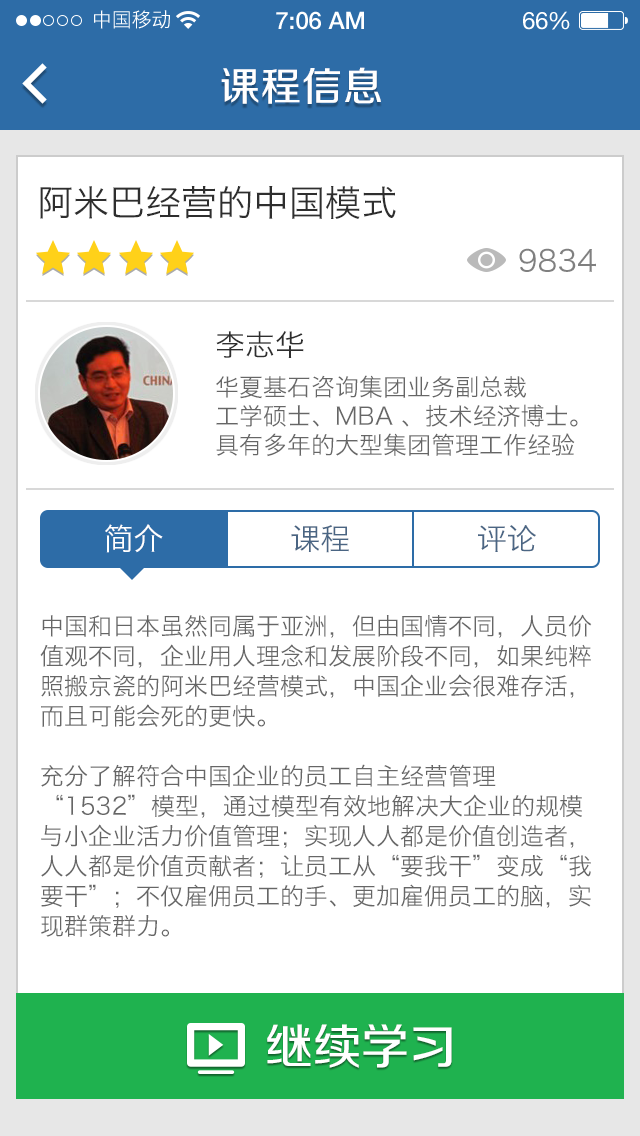
<style>
.page{position:relative;width:640px;height:1136px;background:#ffffff}
.page>*{position:absolute;margin:0}
.t1{font:20px "HiraginoSansGB-W3";color:#ffffff}
.t2{font:24px "HelveticaNeue-Medium";color:#ffffff}
.t3{font:24px "HelveticaNeue";color:#ffffff}
.t4{font:24px "HelveticaNeue";letter-spacing:-0.02em;color:#ffffff}
.t5{font:40px "FZZZHUNHJW--GB1-0";letter-spacing:0.025em;color:#ffffff}
.t6{font:36px "HiraginoSansGB-W3";color:#2e2e2e}
.t7{font:30px "HiraginoSansGB-W3";color:#808080}
.t8{font:30px "HiraginoSansGB-W3";color:#2e2e2e}
.t9{font:24px "HiraginoSansGB-W3";color:#666666}
.t10{font:30px "HiraginoSansGB-W3";color:#ffffff}
.t11{font:30px "HiraginoSansGB-W3";color:#4b6684}
.t12{font:24px/30px "HiraginoSansGB-W3";color:#666666}
.t13{font:48px "FZZZHUNHJW--GB1-0";color:#ffffff}
</style>
<div class="page">
<p class="t1" style="left:94px;top:10px;width:76px;height:19px">中国移动</p>
<p class="t2" style="left:276px;top:11px;width:88px;height:19px">7:06 AM</p>
<p class="t3" style="left:523px;top:11px;width:47px;height:19px">6<span class="t4">6</span>%</p>
<p class="t5" style="left:221px;top:67px;width:160px;height:37px">课程信息</p>
<p class="t6" style="left:40px;top:186px;width:356px;height:33px">阿米巴经营的中国模式</p>
<p class="t7" style="left:519px;top:248px;width:77px;height:24px">9834</p>
<p class="t8" style="left:216px;top:331px;width:88px;height:27px">李志华</p>
<p class="t9" style="left:216px;top:375px;width:362px;height:82px">华夏基石咨询集团业务副总裁<br>工学硕士、MBA 、技术经济博士。具有多年的大型集团管理工作经验</p>
<p class="t10" style="left:105px;top:524px;width:58px;height:29px">简介</p>
<p class="t11" style="left:291px;top:525px;width:58px;height:28px">课程</p>
<p class="t11" style="left:478px;top:525px;width:58px;height:27px">评论</p>
<p class="t12" style="left:40px;top:614px;width:552px;height:323px">中国和日本虽然同属于亚洲，但由国情不同，人员价值观不同，企业用人理念和发展阶段不同，如果纯粹照搬京瓷的阿米巴经营模式，中国企业会很难存活，而且可能会死的更快。<br><br>充分了解符合中国企业的员工自主经营管理“1532”模型，通过模型有效地解决大企业的规模与小企业活力价值管理；实现人人都是价值创造者，人人都是价值贡献者；让员工从“要我干”变成“我要干”；不仅雇佣员工的手、更加雇佣员工的脑，实现群策群力。</p>
<p class="t13" style="left:267px;top:1024px;width:185px;height:44px">继续学习</p>
</div>
